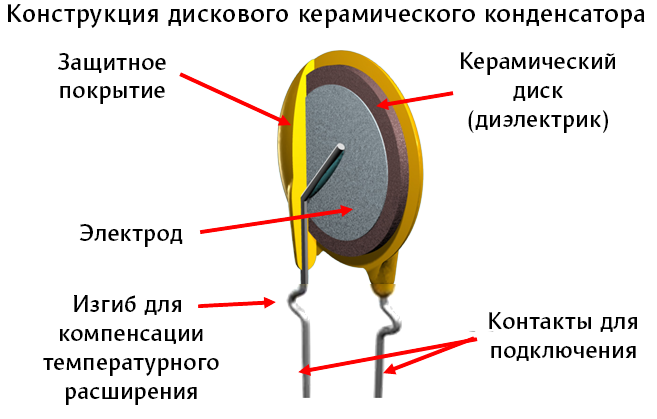
<style>
.page{position:relative;width:657px;height:419px;background:#ffffff}
.page>*{position:absolute;margin:0}
.t1{font:26px "Mezzo-Bold";color:#000000}
.t2{font:24px "Mezzo-Bold";color:#000000}
</style>
<div class="page">
<p class="t1" style="left:7px;top:4px;width:638px;height:24px">Конструкция дискового керамического конденсатора</p>
<p class="t2" style="left:58px;top:53px;width:108px;height:51px;text-align:center">Защитное<br>покрытие</p>
<p class="t2" style="left:460px;top:52px;width:155px;height:81px;text-align:center">Керамический<br>диск<br>(диэлектрик)</p>
<p class="t2" style="left:79px;top:224px;width:104px;height:23px">Электрод</p>
<p class="t2" style="left:43px;top:295px;width:176px;height:110px;text-align:center">Изгиб для <br>компенсации<br>температурного<br>расширения</p>
<p class="t2" style="left:489px;top:312px;width:148px;height:49px;text-align:center">Контакты для<br>подключения</p>
</div>
